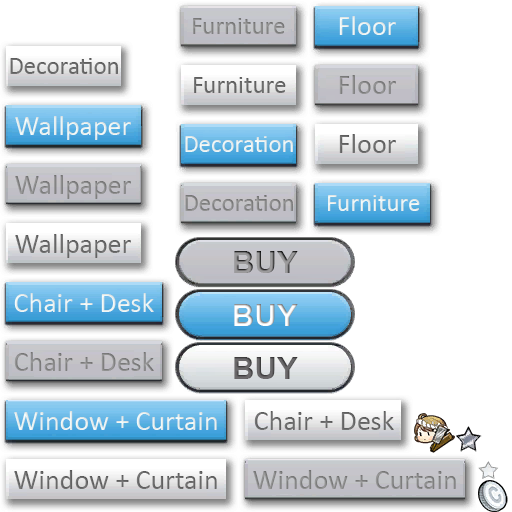
<style>
.page{position:relative;width:512px;height:512px;background:#ffffff}
.page>*{position:absolute;margin:0}
.t1{font:28px "Calibri";color:#f7ffff}
.t2{font:25px "Calibri";color:#848484}
.t3{font:25px "Calibri";color:#7a7a7a}
.t4{font:28px "Calibri";color:#9d9d9d}
.t5{font:25px "Calibri";color:#f7ffff}
.t6{font:28px "Calibri";color:#7a7a7a}
.t7{font:25px "Calibri";color:#898989}
.t8{font:31px "Arial-BoldMT"}
.t9{font:28px "Calibri";color:#898989}
.t10{font:31px "Arial-BoldMT";color:#6b696b}
.t11{font:28px "Calibri";color:#878787}
</style>
<div class="page">
<p class="t1" style="left:339px;top:16px;width:57px;height:19px">Floor</p>
<p class="t2" style="left:193px;top:18px;width:92px;height:16px">Furniture</p>
<p class="t3" style="left:10px;top:58px;width:108px;height:16px">Decoration</p>
<p class="t3" style="left:194px;top:77px;width:92px;height:16px">Furniture</p>
<p class="t4" style="left:339px;top:75px;width:57px;height:19px">Floor</p>
<p class="t1" style="left:15px;top:116px;width:116px;height:24px">Wallpaper</p>
<p class="t5" style="left:185px;top:136px;width:108px;height:16px">Decoration</p>
<p class="t6" style="left:339px;top:134px;width:57px;height:19px">Floor</p>
<p class="t4" style="left:15px;top:175px;width:116px;height:24px">Wallpaper</p>
<p class="t7" style="left:185px;top:195px;width:108px;height:16px">Decoration</p>
<p class="t5" style="left:328px;top:195px;width:92px;height:16px">Furniture</p>
<p class="t6" style="left:15px;top:234px;width:116px;height:24px">Wallpaper</p>
<p class="t8" style="left:234px;top:251px;width:64px;height:22px">BUY</p>
<p class="t1" style="left:14px;top:293px;width:140px;height:19px">Chair + Desk</p>
<p class="t8" style="left:234px;top:304px;width:64px;height:22px">BUY</p>
<p class="t9" style="left:14px;top:352px;width:140px;height:19px">Chair + Desk</p>
<p class="t10" style="left:234px;top:357px;width:64px;height:22px">BUY</p>
<p class="t1" style="left:14px;top:411px;width:203px;height:19px">Window + Curtain</p>
<p class="t6" style="left:254px;top:411px;width:140px;height:19px">Chair + Desk</p>
<p class="t6" style="left:14px;top:470px;width:203px;height:19px">Window + Curtain</p>
<p class="t11" style="left:253px;top:470px;width:203px;height:19px">Window + Curtain</p>
</div>
